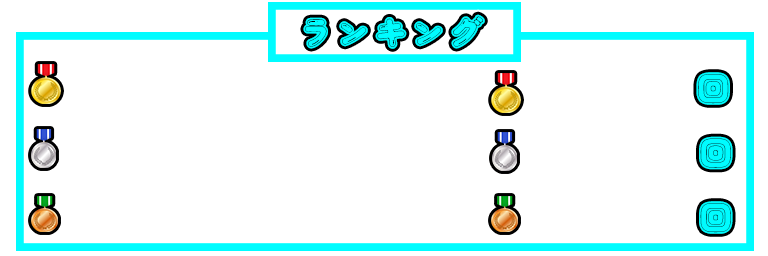
<style>
.page{position:relative;width:768px;height:256px;background:#ffffff}
.page>*{position:absolute;margin:0}
.t1{font:37.5px "DokiDokiFantasia";color:#00fcff}
</style>
<div class="page">
<p class="t1" style="left:303px;top:14px;width:182px;height:35px">ランキング</p>
<p class="t1" style="left:696px;top:72px;width:34px;height:33px">回</p>
<p class="t1" style="left:699px;top:136px;width:34px;height:34px">回</p>
<p class="t1" style="left:699px;top:201px;width:34px;height:33px">回</p>
</div>
